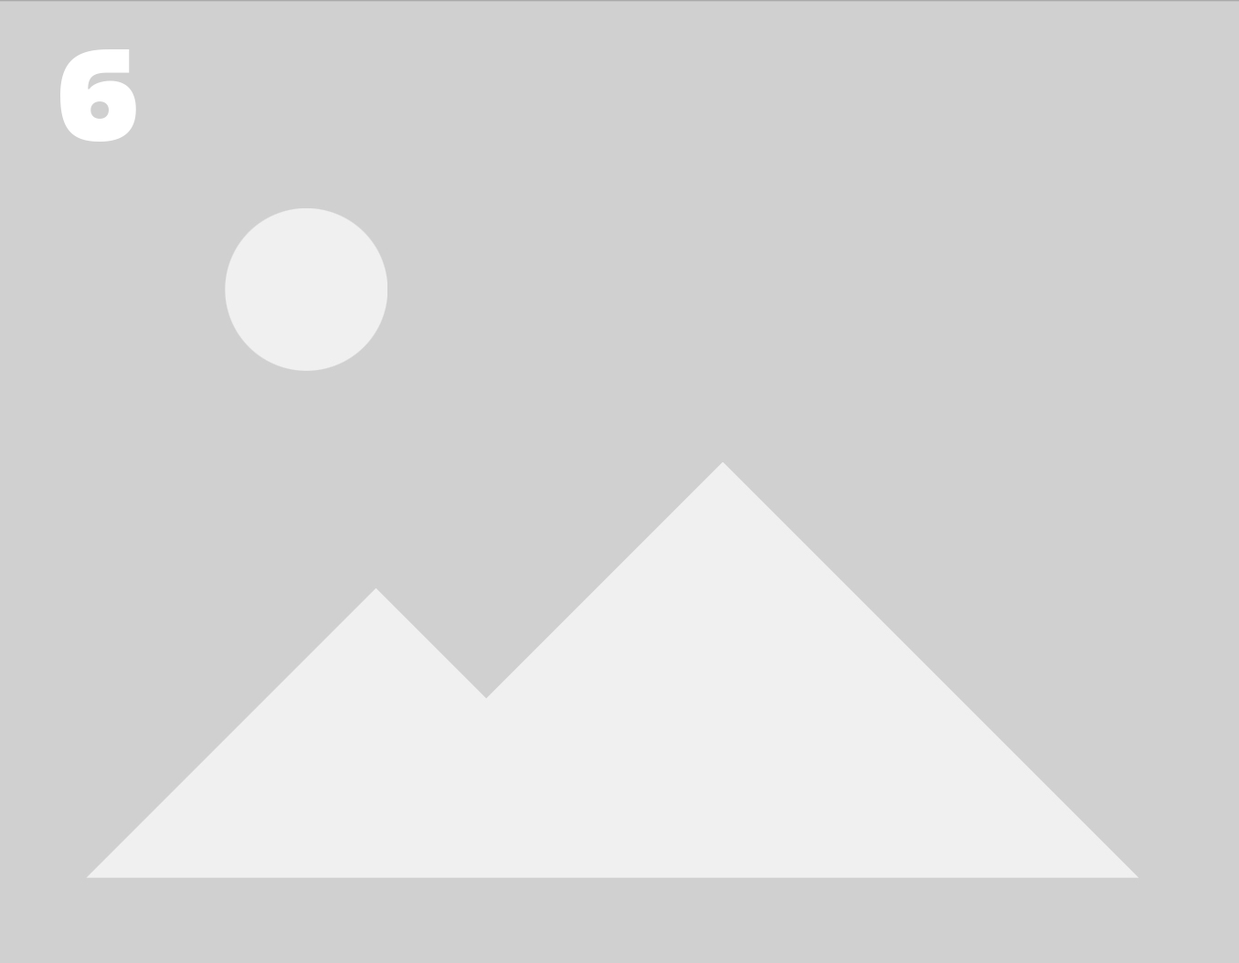
<style>
.page{position:relative;width:1239px;height:963px;background:#d0d0d0}
.page>*{position:absolute;margin:0}
.t1{font:129.7px "Alfarn2";color:#ffffff}
</style>
<div class="page">
<p class="t1" style="left:60px;top:49px;width:76px;height:93px">6</p>
</div>
